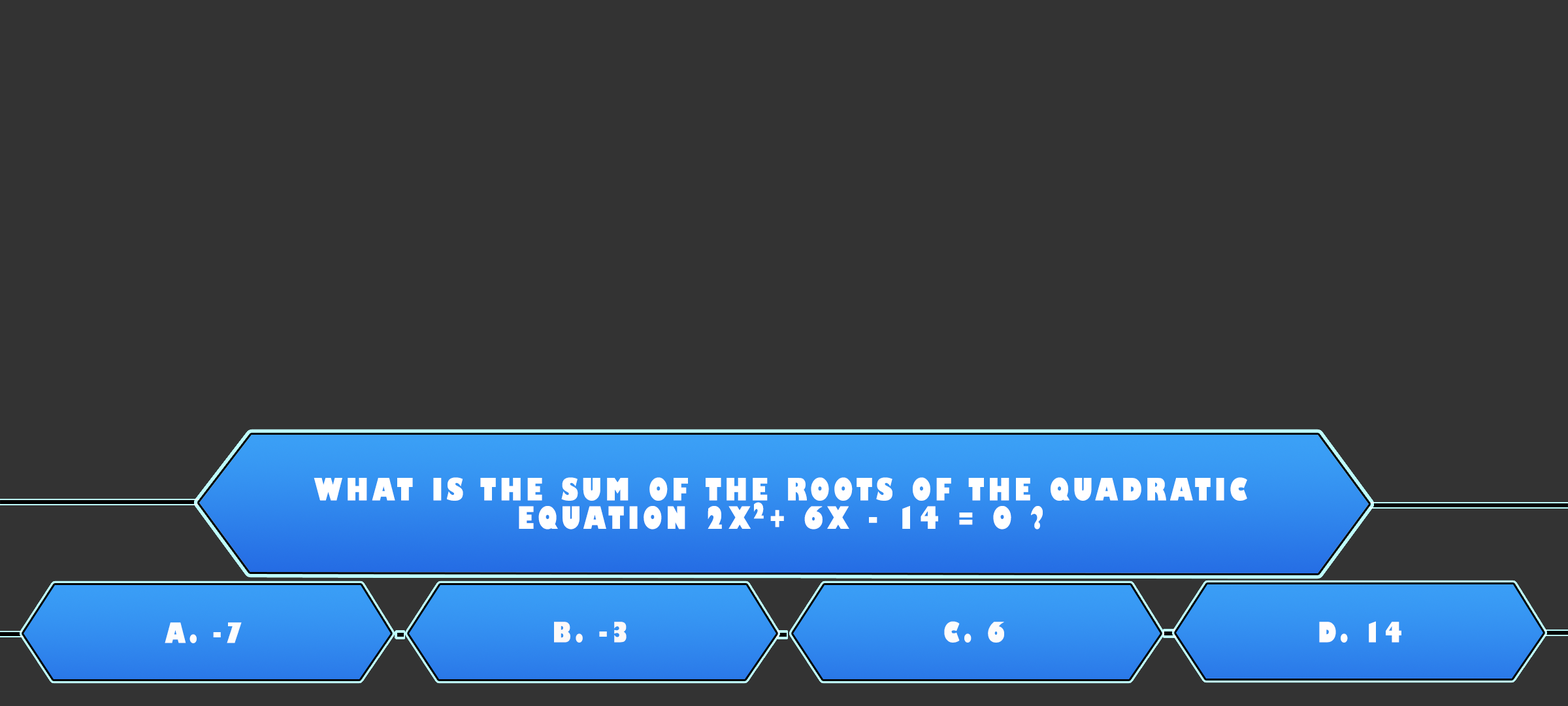
<style>
.page{position:relative;width:1568px;height:706px;background:#333333}
.page>*{position:absolute;margin:0}
.t1{font:30px/28.4px "GillSans-UltraBoldCondensed";letter-spacing:0.115em;color:#ffffff;text-transform:uppercase;scale:1.12 1}
.t2{font:21.1px "GillSans-UltraBoldCondensed";letter-spacing:0.115em;color:#ffffff;text-transform:uppercase;scale:1.11 1}
.t3{font:27.2px "GillSans-UltraBoldCondensed";letter-spacing:0.115em;color:#fdfdfd;text-transform:uppercase;scale:1.12 1}
.t4{font:27.2px "GillSans-UltraBoldCondensed";letter-spacing:0.115em;color:#fcf9f9;text-transform:uppercase;scale:1.12 1}
.t5{font:27.2px "GillSans-UltraBoldCondensed";letter-spacing:0.115em;color:#fdfcfc;text-transform:uppercase;scale:1.12 1}
.t6{font:27.2px "GillSans-UltraBoldCondensed";letter-spacing:0.115em;color:#fffdfd;text-transform:uppercase;scale:1.12 1}
</style>
<div class="page">
<p class="t1" style="left:314px;top:477px;width:933px;height:52px;text-align:center">What is the sum of the roots of the quadratic<br>equation 2x + 6x - 14 = 0 ?</p>
<p class="t2" style="left:753px;top:502px;width:11px;height:17px">2</p>
<p class="t3" style="left:165px;top:622px;width:77px;height:21px">A. -7</p>
<p class="t4" style="left:554px;top:621px;width:73px;height:21px">B. -3</p>
<p class="t5" style="left:944px;top:621px;width:60px;height:21px">C. 6</p>
<p class="t6" style="left:1319px;top:621px;width:82px;height:21px">D. 14</p>
</div>
